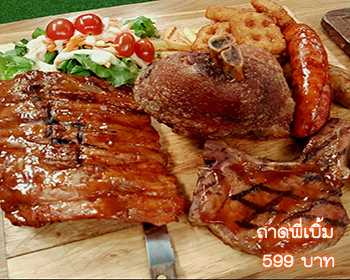
<style>
.page{position:relative;width:350px;height:280px}
.page>*{position:absolute;margin:0}
.t1{font:24px "THKodchasal";color:#ffffff}
</style>
<div class="page">
<p class="t1" style="left:256px;top:217px;width:79px;height:51px;text-align:right">ถาดพี่เบิ้ม<br>บาท 599</p>
</div>
